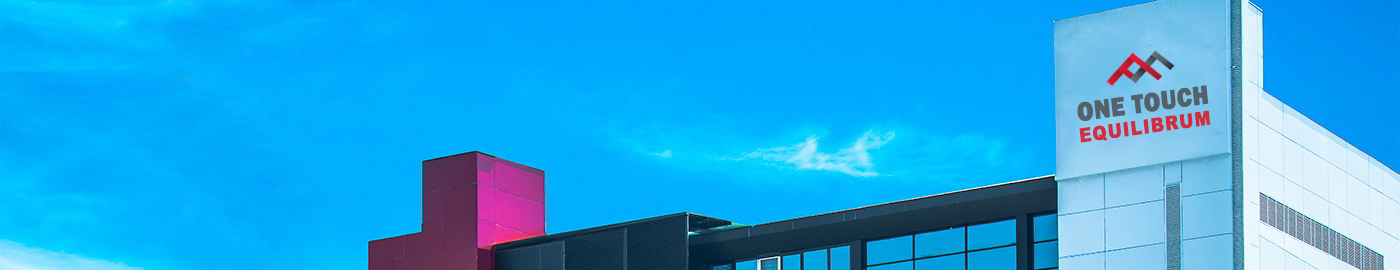
<style>
.page{position:relative;width:1400px;height:270px}
.page>*{position:absolute;margin:0}
.t1{font:27.2px "FranklinGothic-Heavy";letter-spacing:0.01em;color:#54616a;text-transform:uppercase;font-weight:bold;scale:0.86 1}
.t2{font:19.6px "Arial-Black";letter-spacing:0.01em;color:#cf2e43;text-transform:uppercase;font-weight:bold;scale:0.86 1}
</style>
<div class="page">
<p class="t1" style="left:1077px;top:85px;width:132px;height:36px;rotate:-8deg">ONE TOUCH</p>
<p class="t2" style="left:1079px;top:110px;width:132px;height:33px;rotate:-8deg">EQUILIBRUM</p>
</div>
